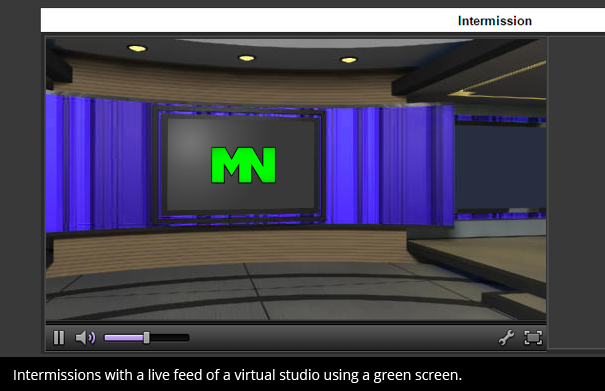
<style>
.page{position:relative;width:605px;height:391px}
.page>*{position:absolute;margin:0}
.t1{font:14px "OpenSans";color:#ffffff}
</style>
<div class="page">
<p class="t1" style="left:14px;top:369px;width:448px;height:14px">Intermissions with a live feed of a virtual studio using a green screen.</p>
</div>
